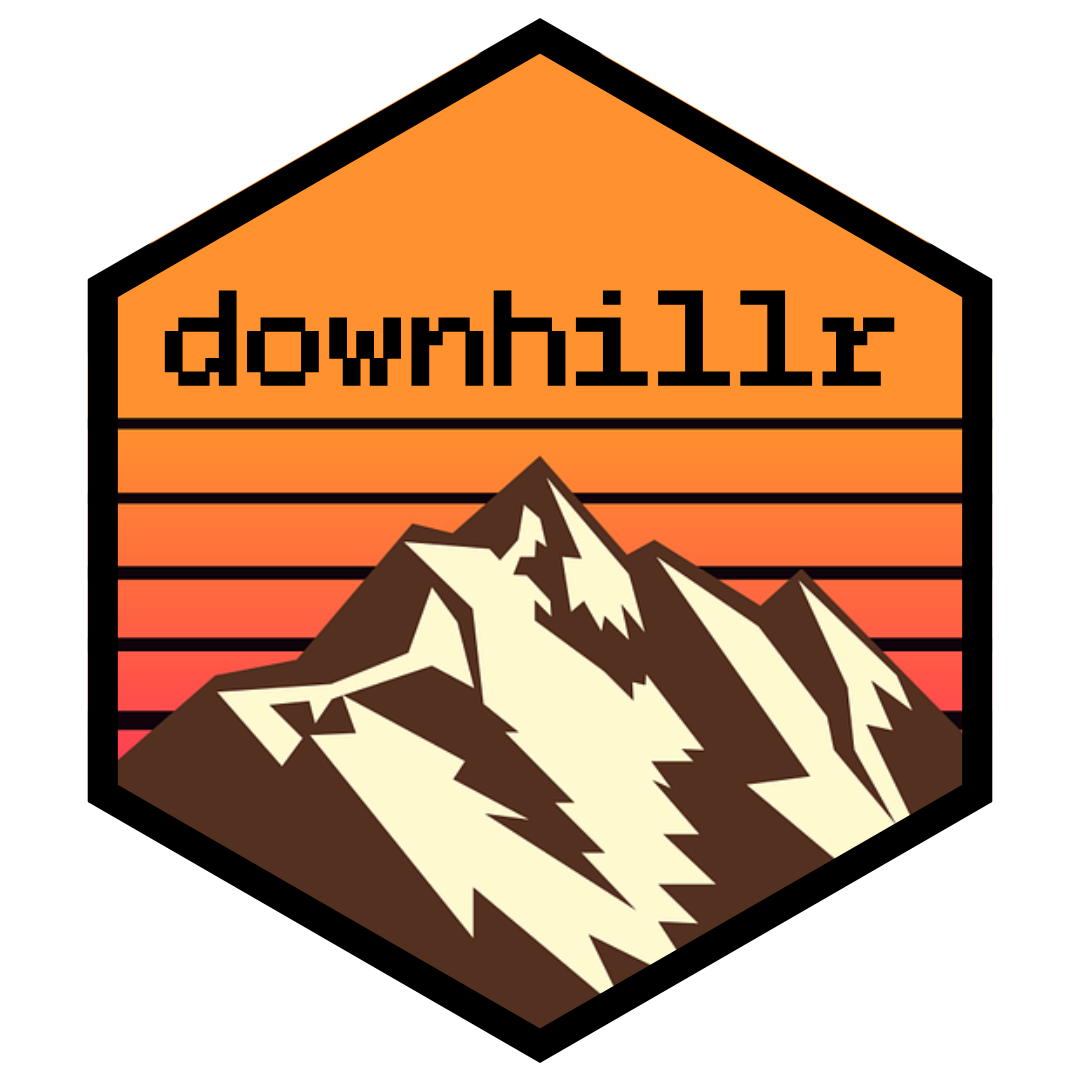
<style>
.page{position:relative;width:1080px;height:1080px;background:#ffffff}
.page>*{position:absolute;margin:0}
.t1{font:135px "BPdotsSquares-Bold";color:#000000;font-weight:bold}
</style>
<div class="page">
<p class="t1" style="left:164px;top:290px;width:731px;height:96px">downhillr</p>
</div>
